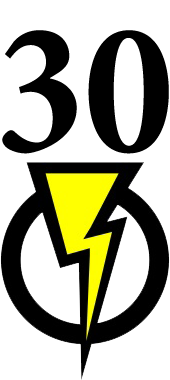
<style>
.page{position:relative;width:170px;height:380px;background:#ffffff}
.page>*{position:absolute;margin:0}
.t1{font:190px "MinionPro-BoldCn";color:#000000}
</style>
<div class="page">
<p class="t1" style="left:2px;top:30px;width:167px;height:124px">30</p>
</div>
